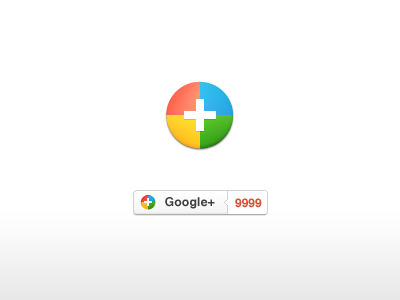
<style>
.page{position:relative;width:400px;height:300px;background:#ffffff}
.page>*{position:absolute;margin:0}
.t1{font:60px "Helvetica-Bold";color:#ffffff}
.t2{font:12px "Helvetica-Bold";letter-spacing:0.02em;color:#414040}
.t3{font:12px "Helvetica-Bold";color:#dd4b39}
</style>
<div class="page">
<p class="t1" style="left:184px;top:99px;width:32px;height:32px">+</p>
<p class="t2" style="left:165px;top:197px;width:50px;height:12px">Google+</p>
<p class="t3" style="left:235px;top:198px;width:27px;height:10px">9999</p>
</div>
